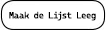
<style>
.page{position:relative;width:106px;height:30px;background:#ffffff}
.page>*{position:absolute;margin:0}
.t1{font:9px "CascadiaCode";letter-spacing:-0.05em;color:#000000}
</style>
<div class="page">
<p class="t1" style="left:9px;top:11px;width:87px;height:10px">Maak de Lijst Leeg</p>
</div>
